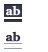
<style>
.page{position:relative;width:48px;height:52px;background:#ffffff}
.page>*{position:absolute;margin:0}
.t1{font:12px "Georgia-Bold";color:#ffffff}
.t2{font:12px "Georgia-Bold";color:#2d2d3f}
</style>
<div class="page">
<p class="t1" style="left:6px;top:5px;width:15px;height:11px">ab</p>
<p class="t2" style="left:6px;top:31px;width:15px;height:11px">ab</p>
</div>
